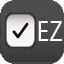
<style>
.page{position:relative;width:64px;height:64px}
.page>*{position:absolute;margin:0}
.t1{font:28.7px "MyriadPro-Regular";color:#ffffff;scale:0.86 1}
</style>
<div class="page">
<p class="t1" style="left:38px;top:21px;width:24px;height:20px">EZ</p>
</div>
